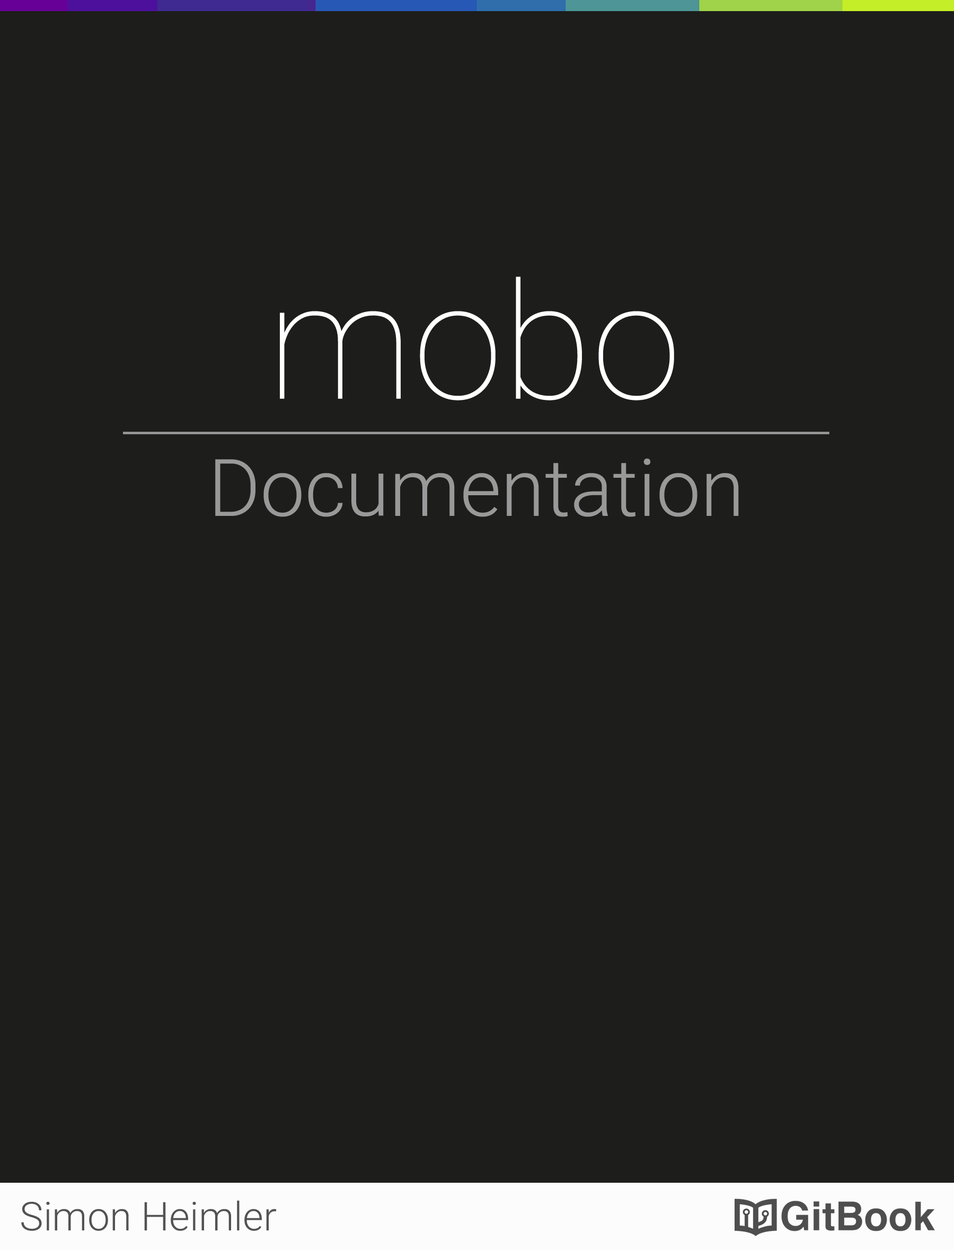
<style>
.page{position:relative;width:954px;height:1250px;background:#1d1d1b}
.page>*{position:absolute;margin:0}
.t1{font:79.5px "Roboto-Light";color:#999999}
.t2{font:39.7px "Roboto-Light";color:#525252}
</style>
<div class="page">
<p class="t1" style="left:215px;top:458px;width:524px;height:59px">Documentation</p>
<p class="t2" style="left:21px;top:1201px;width:256px;height:30px">Simon Heimler</p>
</div>
